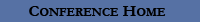
<style>
.page{position:relative;width:200px;height:22px;background:#5671a4}
.page>*{position:absolute;margin:0}
.t1{font:12px "Garamond-Bold";color:#000000}
.t2{font:16px "Garamond-Bold";color:#000000}
</style>
<div class="page">
<p class="t1" style="left:29px;top:6px;width:137px;height:10px"><span class="t2">C</span>ONFERENCE<span class="t2"> H</span>OME</p>
</div>
